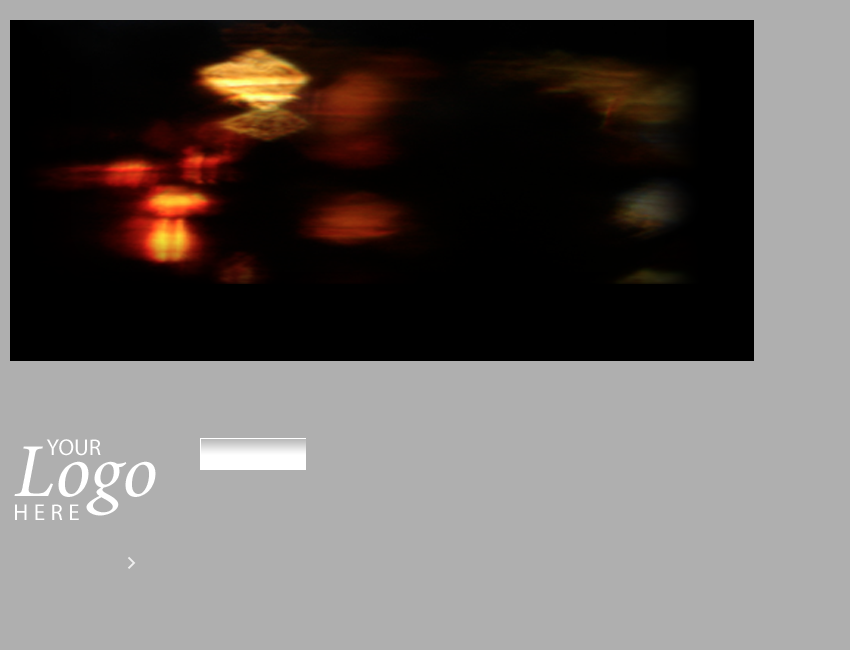
<style>
.page{position:relative;width:850px;height:650px;background:#afafaf}
.page>*{position:absolute;margin:0}
.t1{font:76.3px "MinionPro-It";color:#ffffff}
.t2{font:76.3px "MinionPro-It";color:#ffffff;text-transform:uppercase}
.t3{font:22.9px "MyriadPro-Regular";color:#ffffff;text-transform:uppercase}
.t4{font:22.9px "MyriadPro-Regular";letter-spacing:0.24em;color:#ffffff;text-transform:uppercase}
</style>
<div class="page">
<p class="t1" style="left:14px;top:446px;width:142px;height:70px"><span class="t2">L</span>ogo</p>
<p class="t3" style="left:46px;top:439px;width:55px;height:17px">YOUR</p>
<p class="t4" style="left:15px;top:504px;width:64px;height:16px">HERE</p>
</div>
